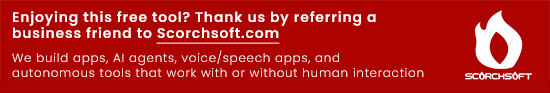
<style>
.page{position:relative;width:550px;height:93px;background:#ac0200}
.page>*{position:absolute;margin:0}
.t1{font:13.9px "Poppins-SemiBold";letter-spacing:0.06em;color:#ffffff}
.t2{font:13.9px "Poppins-SemiBold";letter-spacing:0.06em;color:#ffffff;text-decoration:underline}
.t3{font:12px "Poppins-Light";letter-spacing:0.06em;color:#ffffff}
</style>
<div class="page">
<p class="t1" style="left:13px;top:11px;width:363px;height:33px">Enjoying this free tool? Thank us by referring a business friend to <span class="t2">Scorchsoft.com</span></p>
<p class="t3" style="left:12px;top:50px;width:412px;height:27px">We build apps, AI agents, voice/speech apps, and <br>autonomous tools that work with or without human interaction</p>
</div>
